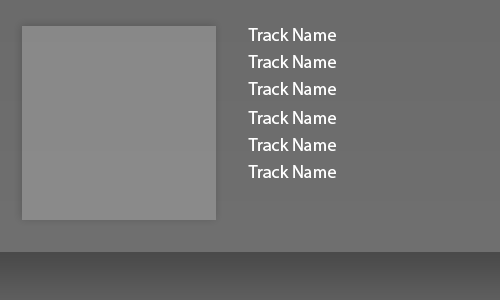
<style>
.page{position:relative;width:500px;height:300px}
.page>*{position:absolute;margin:0}
.t1{font:18px "MyriadPro-Regular";color:#ffffff}
</style>
<div class="page">
<p class="t1" style="left:248px;top:28px;width:88px;height:13px">Track Name</p>
<p class="t1" style="left:248px;top:55px;width:88px;height:13px">Track Name</p>
<p class="t1" style="left:248px;top:82px;width:88px;height:13px">Track Name</p>
<p class="t1" style="left:248px;top:111px;width:88px;height:13px">Track Name</p>
<p class="t1" style="left:248px;top:138px;width:88px;height:13px">Track Name</p>
<p class="t1" style="left:248px;top:165px;width:88px;height:13px">Track Name</p>
</div>
